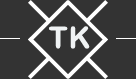
<style>
.page{position:relative;width:136px;height:79px;background:#333333}
.page>*{position:absolute;margin:0}
.t1{font:30px "ArialRoundedMTBold";color:#f0f3f4}
.t2{font:7px "ArialRoundedMTBold";color:#f0f3f4}
</style>
<div class="page">
<p class="t1" style="left:49px;top:26px;width:41px;height:23px"><span class="t2">   </span>T K</p>
</div>
